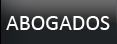
<style>
.page{position:relative;width:117px;height:44px;background:#1f2326}
.page>*{position:absolute;margin:0}
.t1{font:22px "Calibri";color:#ffffff}
</style>
<div class="page">
<p class="t1" style="left:6px;top:16px;width:104px;height:14px">ABOGADOS</p>
</div>
